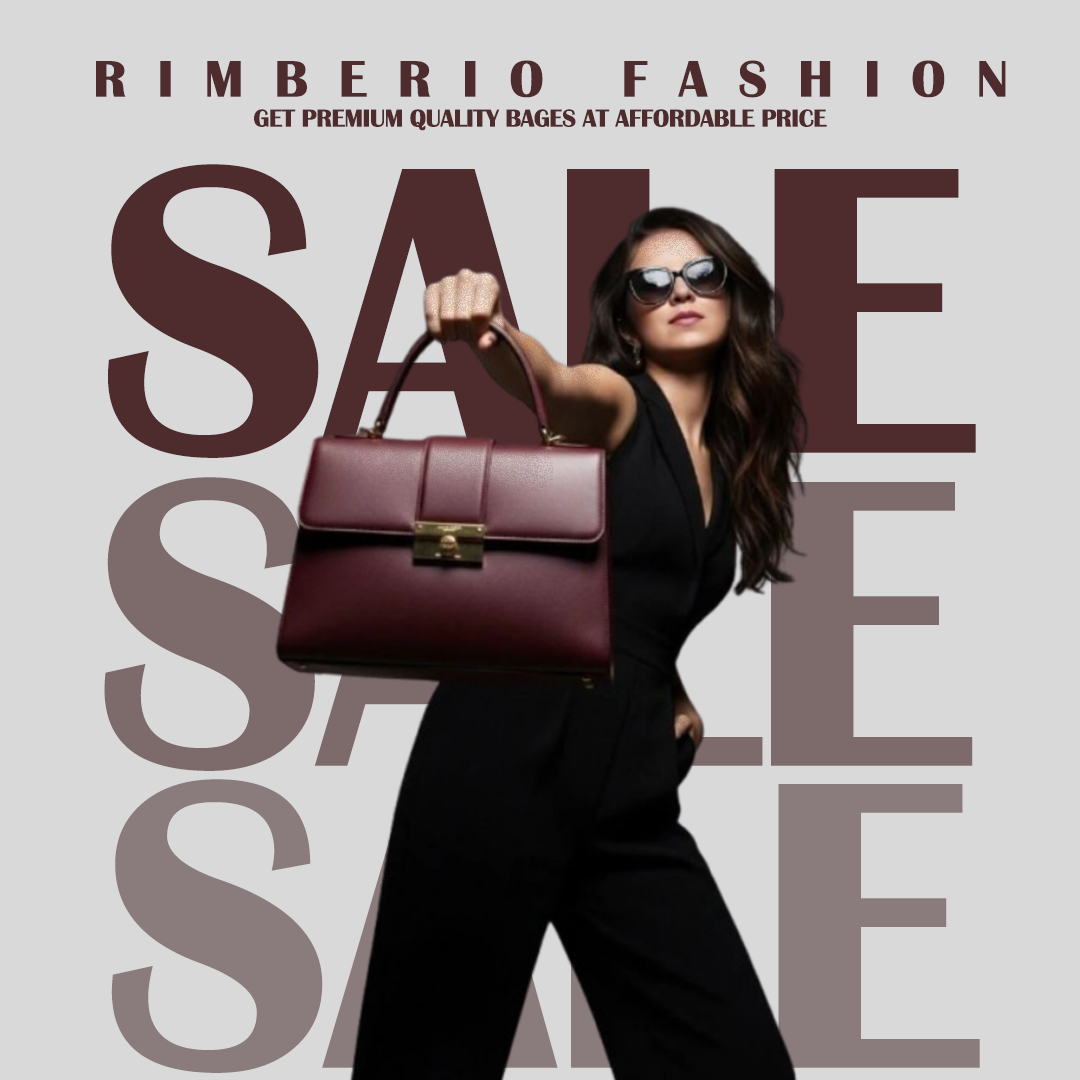
<style>
.page{position:relative;width:1080px;height:1080px;background:#d9d9d9}
.page>*{position:absolute;margin:0}
.t1{font:53.1px "BritannicBold";letter-spacing:0.58em;color:#4e2c2d}
.t2{font:25.3px "BritannicBold";letter-spacing:-0.02em;color:#4e2c2d}
.t3{font:425.3px "BritannicBold";letter-spacing:-0.02em;color:#4e2c2d}
.t4{font:425.3px "BritannicBold";letter-spacing:-0.02em}
</style>
<div class="page">
<p class="t1" style="left:96px;top:60px;width:910px;height:38px">RIMBERIO FASHION</p>
<p class="t2" style="left:254px;top:109px;width:573px;height:22px">GET PREMIUM QUALITY BAGES AT AFFORDABLE PRICE</p>
<p class="t3" style="left:108px;top:164px;width:868px;height:294px">SALE</p>
<p class="t4" style="left:104px;top:477px;width:869px;height:294px">SALE</p>
<p class="t4" style="left:111px;top:779px;width:869px;height:294px">SALE</p>
</div>
